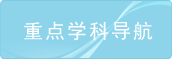
<style>
.page{position:relative;width:172px;height:59px;background:#8dd4eb}
.page>*{position:absolute;margin:0}
.t1{font:20px "SimHei";letter-spacing:0.1em;color:#ffffff}
</style>
<div class="page">
<p class="t1" style="left:24px;top:21px;width:129px;height:20px">重点学科导航</p>
</div>
